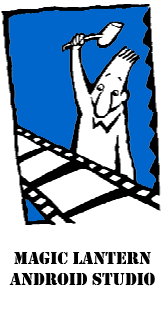
<style>
.page{position:relative;width:163px;height:314px;background:#ffffff}
.page>*{position:absolute;margin:0}
.t1{font:18px "Stencil";color:#000000}
</style>
<div class="page">
<p class="t1" style="left:9px;top:252px;width:146px;height:34px;text-align:center">Magic Lantern<br>Android studio</p>
</div>
